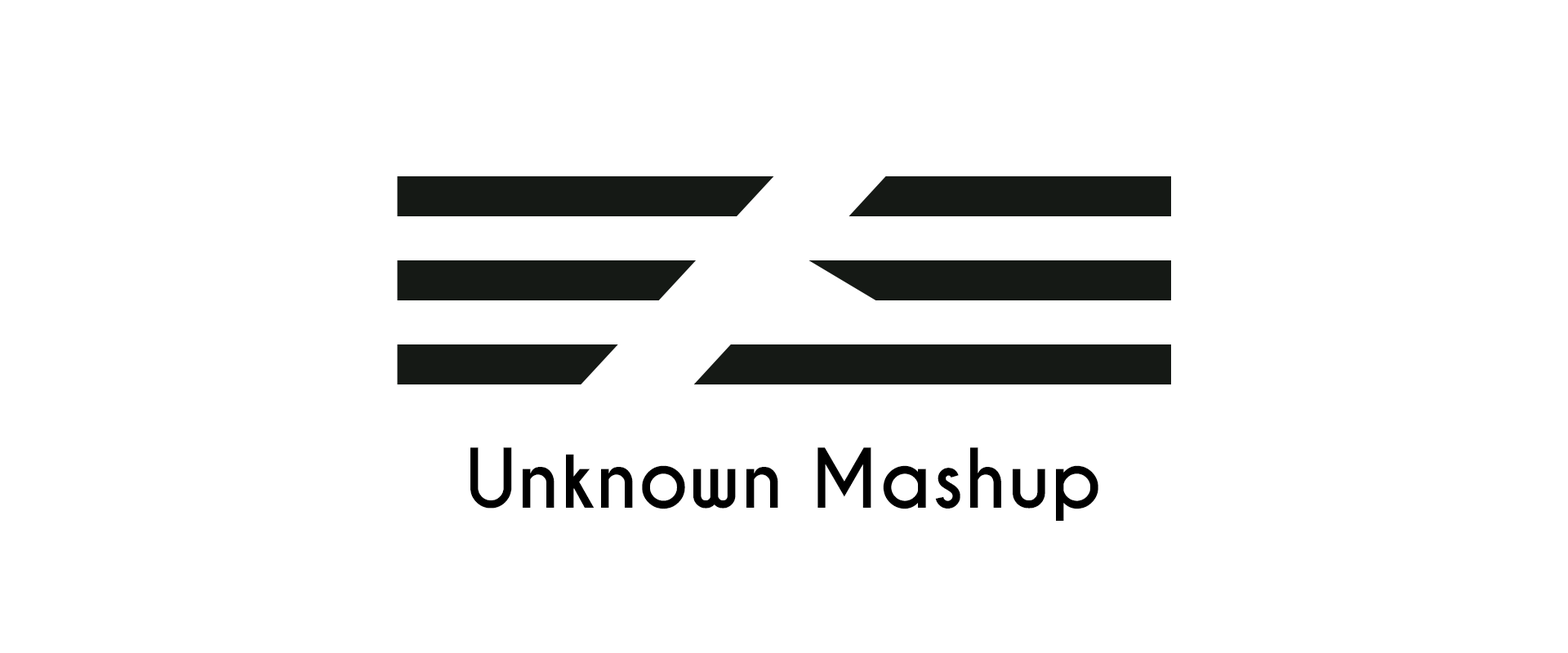
<style>
.page{position:relative;width:1568px;height:653px;background:#ffffff}
.page>*{position:absolute;margin:0}
.t1{font:77.1px "CaviarDreams-Bold";color:#000000}
</style>
<div class="page">
<p class="t1" style="left:470px;top:448px;width:628px;height:73px">Unknown Mashup</p>
</div>
